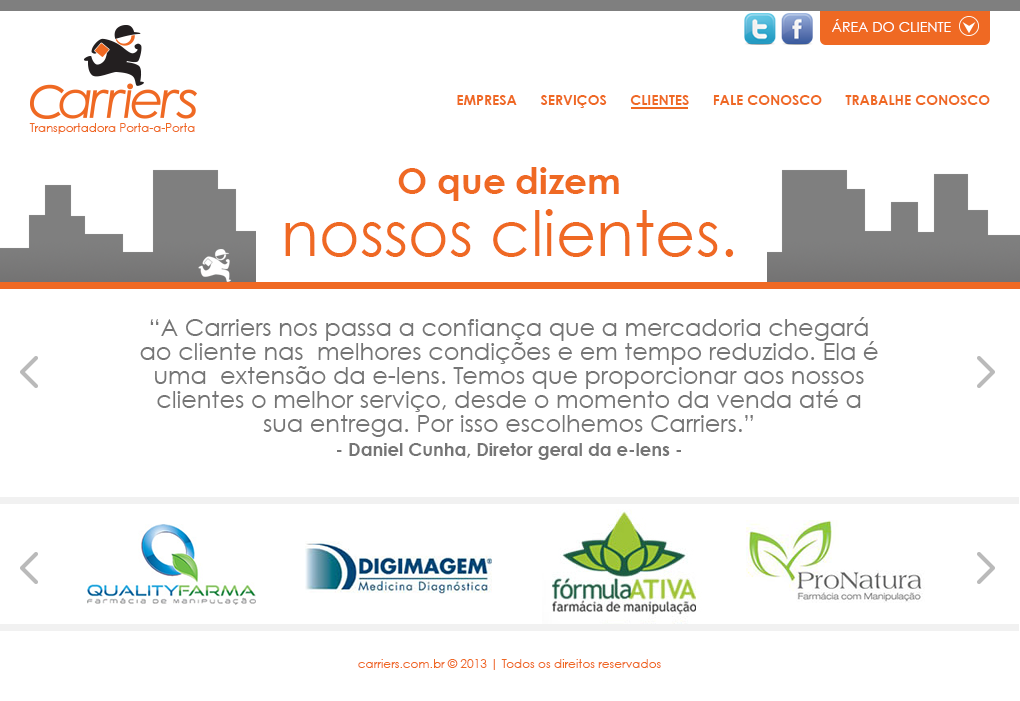
<style>
.page{position:relative;width:1020px;height:701px;background:#ffffff}
.page>*{position:absolute;margin:0}
.t1{font:14px "CenturyGothic";color:#ffffff}
.t2{font:14px "CenturyGothic-Bold";color:#ef6923}
.t3{font:11.8px "CenturyGothic";color:#ef6923}
.t4{font:62.7px/61.4px "CenturyGothic";color:#ef6923}
.t5{font:36px/61.4px "CenturyGothic-Bold";color:#ef6923}
.t6{font:24px/24px "CenturyGothic";color:#757575}
.t7{font:18px/24px "CenturyGothic-Bold";color:#757575}
.t8{font:12px "CenturyGothic";color:#ef6923}
</style>
<div class="page">
<p class="t1" style="left:832px;top:19px;width:119px;height:13px">ÁREA DO CLIENTE</p>
<p class="t2" style="left:457px;top:95px;width:533px;height:13px">EMPRESA      SERVIÇOS      CLIENTES      FALE CONOSCO      TRABALHE CONOSCO</p>
<p class="t3" style="left:29px;top:123px;width:166px;height:11px">Transportadora Porta-a-Porta</p>
<p class="t4" style="left:285px;top:167px;width:449px;height:90px;text-align:center"><span class="t5">O que dizem<br></span>nossos clientes.</p>
<p class="t6" style="left:140px;top:317px;width:738px;height:143px;text-align:center">“A Carriers nos passa a confiança que a mercadoria chegará ao cliente nas  melhores condições e em tempo reduzido. Ela é uma  extensão da e-lens. Temos que proporcionar aos nossos clientes o melhor serviço, desde o momento da venda até a sua entrega. Por isso escolhemos Carriers.”   <br><span class="t7">- Daniel Cunha, Diretor geral da e-lens -</span></p>
<p class="t8" style="left:358px;top:659px;width:303px;height:11px">carriers.com.br © 2013 | Todos os direitos reservados</p>
</div>
